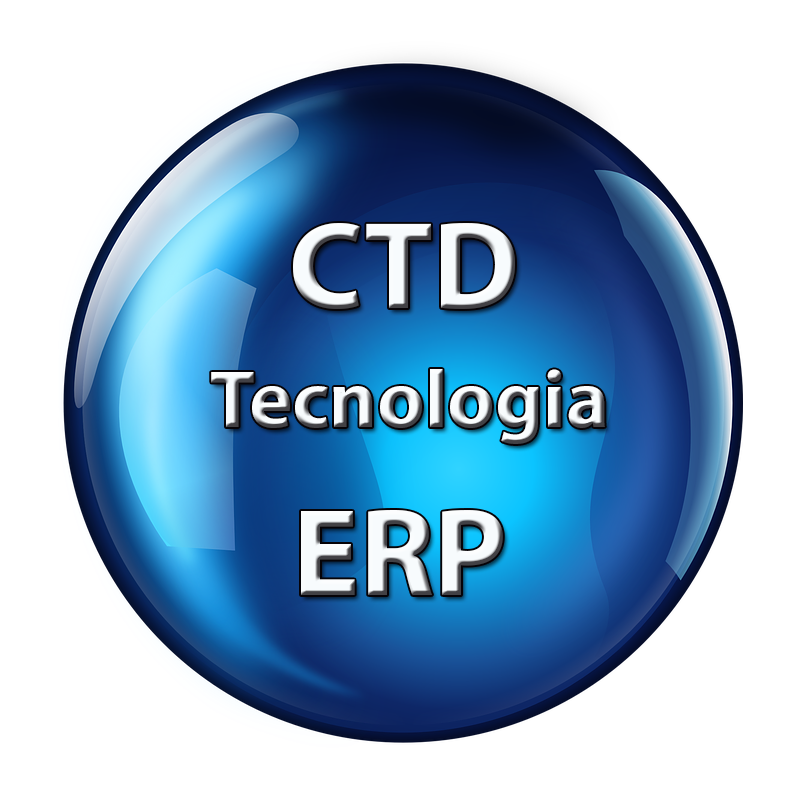
<style>
.page{position:relative;width:800px;height:800px;background:#ffffff}
.page>*{position:absolute;margin:0}
.t1{font:124.7px "MyriadPro-Bold";color:#f7fbfd}
.t2{font:82.2px "MyriadPro-Bold"}
</style>
<div class="page">
<p class="t1" style="left:293px;top:223px;width:222px;height:86px">CTD</p>
<p class="t2" style="left:211px;top:369px;width:394px;height:75px">Tecnologia</p>
<p class="t1" style="left:301px;top:510px;width:202px;height:85px">ERP</p>
</div>
